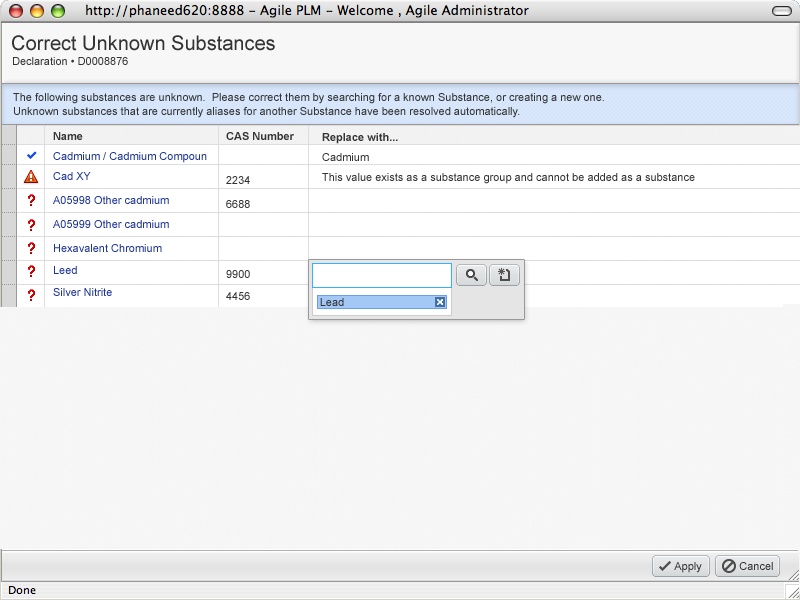
<style>
.page{position:relative;width:800px;height:600px;background:#ffffff}
.page>*{position:absolute;margin:0}
.t1{font:20px "ArialMT";color:#333333}
.t2{font:11px "ArialMT";color:#333333}
.t3{font:11px/14px "ArialMT";color:#333333}
.t4{font:11px "Arial-BoldMT";color:#333333}
.t5{font:11px/20px "Arial-BoldMT";color:#333333}
.t6{font:11px/24px "ArialMT";color:#333333}
.t7{font:11px/22px "ArialMT";color:#333333}
.t8{font:11px/20px "ArialMT";color:#333333}
.t9{font:11px/24px "ArialMT";color:#1f3695}
.t10{font:11px/20px "ArialMT";color:#1f3695}
.t11{font:11px/22px "ArialMT";color:#1f3695}
</style>
<div class="page">
<p class="t1" style="left:12px;top:35px;width:263px;height:16px">Correct Unknown Substances</p>
<p class="t2" style="left:13px;top:57px;width:115px;height:8px">Declaration • D0008876</p>
<p class="t3" style="left:13px;top:93px;width:591px;height:25px">The following substances are unknown.  Please correct them by searching for a known Substance, or creating a new one.<br>Unknown substances that are currently aliases for another Substance have been resolved automatically.</p>
<p class="t4" style="left:53px;top:132px;width:30px;height:8px">Name</p>
<p class="t5" style="left:226px;top:132px;width:68px;height:168px">CAS Number<br><br><span class="t6">2234<br>6688<br><br><br></span><span class="t7">9900<br>4456</span></p>
<p class="t8" style="left:322px;top:133px;width:373px;height:51px"><span class="t5">Replace with...<br></span>Cadmium<br>This value exists as a substance group and cannot be added as a substance</p>
<p class="t9" style="left:53px;top:152px;width:154px;height:144px"><span class="t5"><br></span><span class="t10">Cadmium / Cadmium Compoun<br>Cad XY<br></span>A05998 Other cadmium<br>A05999 Other cadmium<br>Hexavalent Chromium<br><span class="t11">Leed <br>Silver Nitrite</span></p>
<p class="t2" style="left:320px;top:298px;width:24px;height:8px">Lead</p>
<p class="t2" style="left:674px;top:562px;width:28px;height:11px">Apply</p>
<p class="t2" style="left:739px;top:562px;width:34px;height:8px">Cancel</p>
</div>
